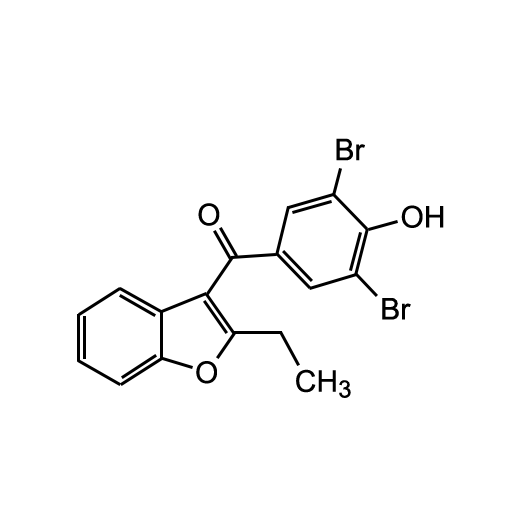
<style>
.page{position:relative;width:512px;height:512px;background:#ffffff}
.page>*{position:absolute;margin:0}
.t1{font:30px "ArialMT";color:#000000}
.t2{font:24px "ArialMT";color:#000000}
</style>
<div class="page">
<p class="t1" style="left:336px;top:138px;width:29px;height:23px">Br</p>
<p class="t1" style="left:198px;top:203px;width:22px;height:23px">O</p>
<p class="t1" style="left:401px;top:205px;width:43px;height:23px">OH</p>
<p class="t1" style="left:382px;top:298px;width:29px;height:22px">Br</p>
<p class="t1" style="left:196px;top:361px;width:21px;height:23px">O</p>
<p class="t1" style="left:296px;top:369px;width:40px;height:24px">CH</p>
<p class="t2" style="left:339px;top:380px;width:12px;height:18px">3</p>
</div>
